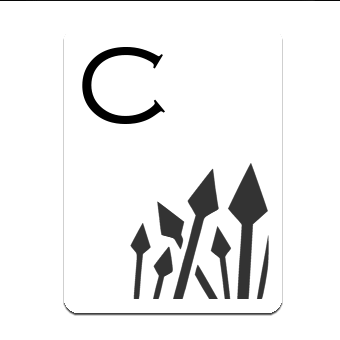
<style>
.page{position:relative;width:340px;height:340px;background:#ffffff}
.page>*{position:absolute;margin:0}
.t1{font:111.7px "CopperplateGothic-Light";color:#000000}
</style>
<div class="page">
<p class="t1" style="left:82px;top:46px;width:83px;height:77px">C</p>
</div>
